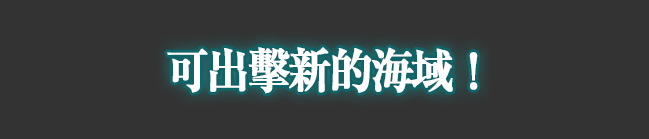
<style>
.page{position:relative;width:649px;height:139px;background:#333333}
.page>*{position:absolute;margin:0}
.t1{font:48px "RyuminPro-Bold";letter-spacing:-0.08em;color:#ffffff;font-weight:bold;scale:0.9 1}
</style>
<div class="page">
<p class="t1" style="left:167px;top:47px;width:311px;height:47px">可出擊新的海域！</p>
</div>
